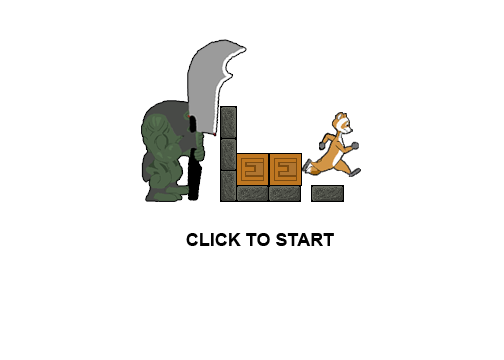
<style>
.page{position:relative;width:504px;height:360px;background:#ffffff}
.page>*{position:absolute;margin:0}
.t1{font:18px "Arial-BoldMT";color:#010101}
</style>
<div class="page">
<p class="t1" style="left:186px;top:233px;width:148px;height:13px">CLICK TO START</p>
</div>
